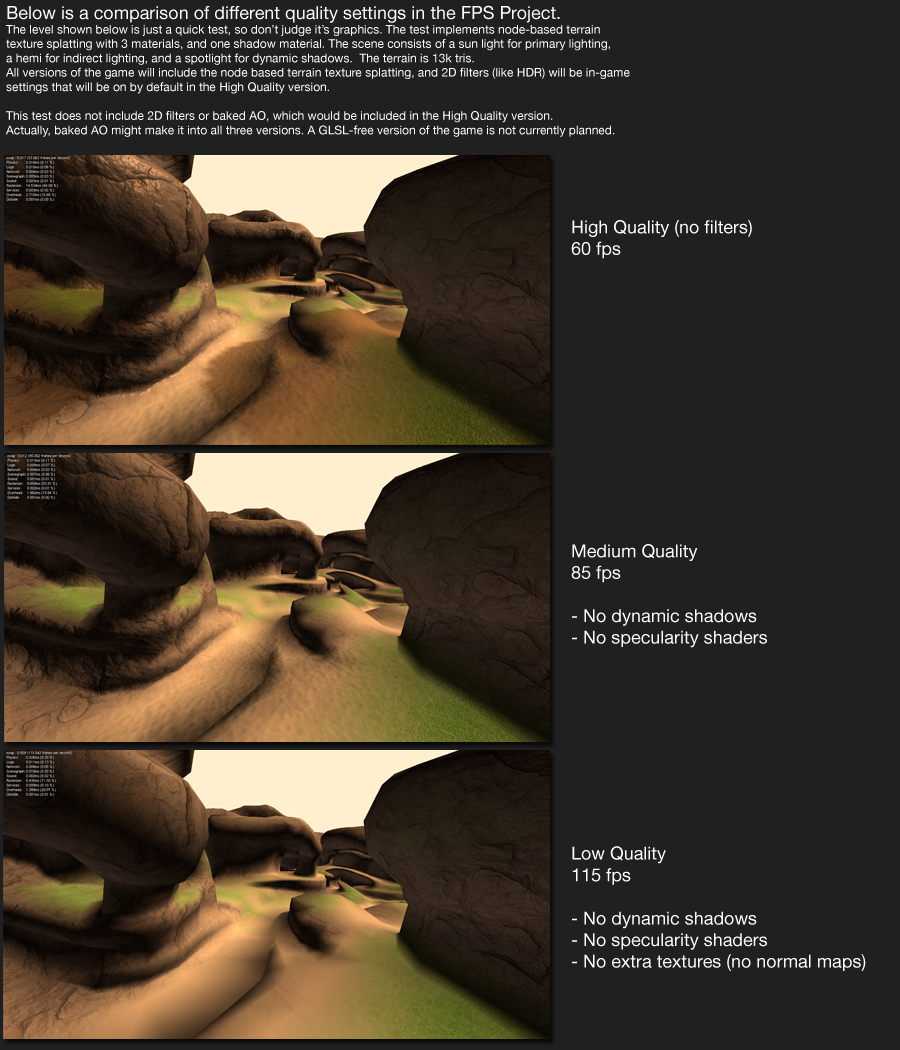
<style>
.page{position:relative;width:900px;height:1050px;background:#202020}
.page>*{position:absolute;margin:0}
.t1{font:12px "HelveticaNeue";color:#ffffff}
.t2{font:18px "HelveticaNeue";color:#ffffff}
</style>
<div class="page">
<p class="t1" style="left:6px;top:5px;width:624px;height:132px"><span class="t2">Below is a comparison of different quality settings in the FPS Project.<br></span>The level shown below is just a quick test, so don’t judge it’s graphics. The test implements node-based terrain<br>texture splatting with 3 materials, and one shadow material. The scene consists of a sun light for primary lighting,<br>a hemi for indirect lighting, and a spotlight for dynamic shadows.  The terrain is 13k tris.<br>All versions of the game will include the node based terrain texture splatting, and 2D filters (like HDR) will be in-game<br>settings that will be on by default in the High Quality version.<br><br>This test does not include 2D filters or baked AO, which would be included in the High Quality version.<br>Actually, baked AO might make it into all three versions. A GLSL-free version of the game is not currently planned.</p>
<p class="t2" style="left:571px;top:220px;width:295px;height:751px">High Quality (no filters)<br>60 fps<br><br><br><br><br><br><br><br><br><br><br><br><br><br>Medium Quality<br>85 fps<br><br>- No dynamic shadows<br>- No specularity shaders<br><br><br><br><br><br><br><br><br><br>Low Quality<br>115 fps<br><br>- No dynamic shadows<br>- No specularity shaders<br>- No extra textures (no normal maps)</p>
</div>
